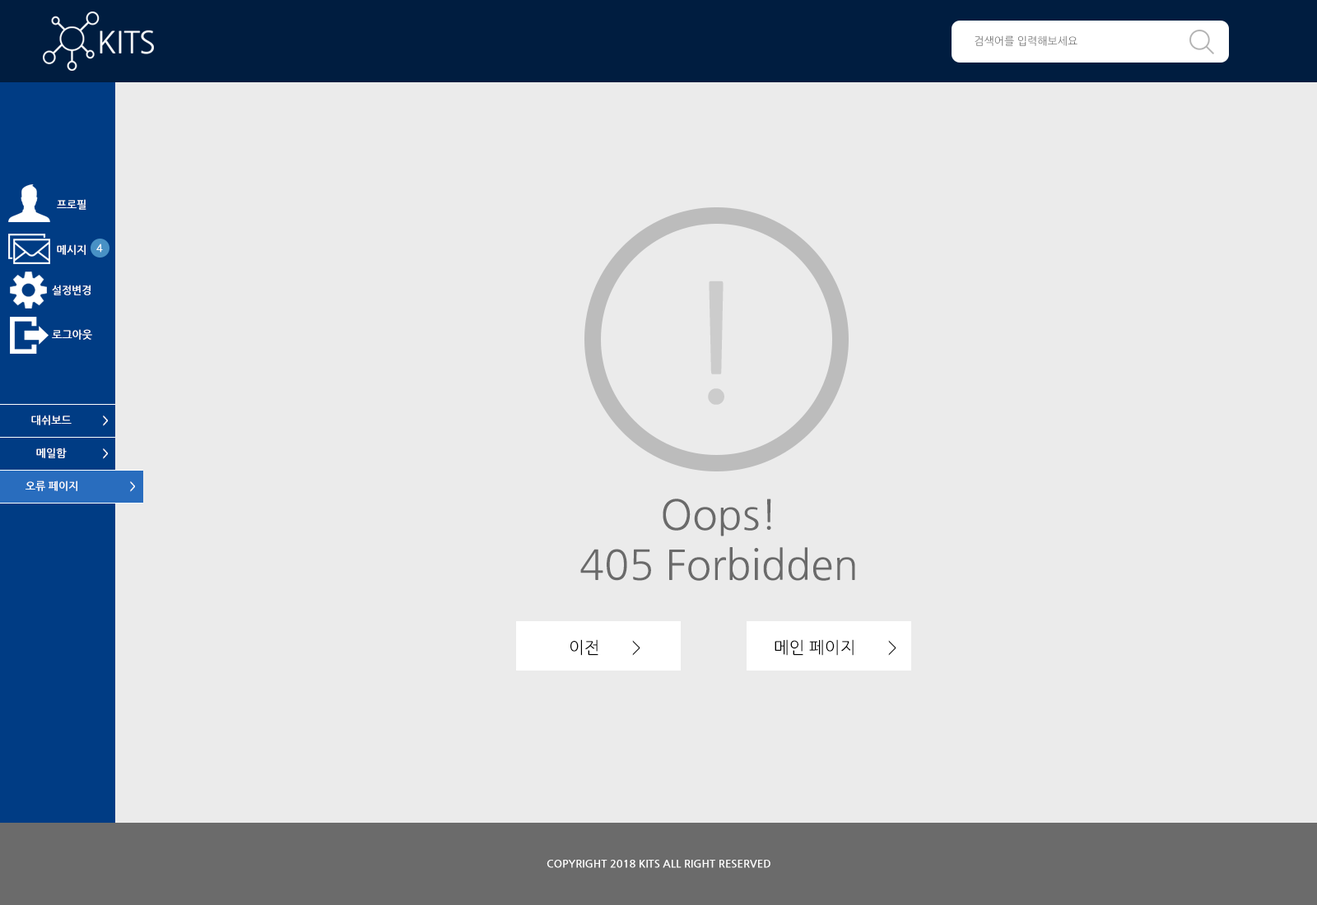
<style>
.page{position:relative;width:1317px;height:905px;background:#ebebeb}
.page>*{position:absolute;margin:0}
.t1{font:10.7px "NanumGothic";color:#737373;text-transform:uppercase}
.t2{font:10.7px "NanumGothicBold";color:#ffffff;text-transform:uppercase}
.t3{font:164.6px "NanumGothic";color:#cccccc;text-transform:uppercase}
.t4{font:41.2px "NanumGothic";color:#6a6a6a}
.t5{font:41.2px "NanumGothic";color:#6a6a6a;text-transform:uppercase}
.t6{font:16.5px "NanumGothic";color:#000000;text-transform:uppercase}
</style>
<div class="page">
<p class="t1" style="left:975px;top:35px;width:102px;height:11px">검색어를 입력해보세요</p>
<p class="t2" style="left:57px;top:199px;width:29px;height:11px">프로필</p>
<p class="t2" style="left:57px;top:244px;width:29px;height:11px">메시지</p>
<p class="t2" style="left:96px;top:244px;width:7px;height:9px">4</p>
<p class="t3" style="left:708px;top:281px;width:16px;height:124px">!</p>
<p class="t2" style="left:52px;top:285px;width:39px;height:10px">설정변경</p>
<p class="t2" style="left:52px;top:329px;width:40px;height:11px">로그아웃</p>
<p class="t2" style="left:31px;top:415px;width:41px;height:11px">대쉬보드</p>
<p class="t2" style="left:103px;top:416px;width:5px;height:10px">&gt;</p>
<p class="t2" style="left:36px;top:448px;width:31px;height:10px">메일함</p>
<p class="t2" style="left:103px;top:449px;width:5px;height:10px">&gt;</p>
<p class="t2" style="left:26px;top:481px;width:51px;height:10px">오류 페이지</p>
<p class="t2" style="left:130px;top:482px;width:5px;height:10px">&gt;</p>
<p class="t4" style="left:663px;top:499px;width:108px;height:38px">Oops<span class="t5">!</span></p>
<p class="t4" style="left:580px;top:547px;width:275px;height:34px"><span class="t5">405 F</span>orbidden</p>
<p class="t6" style="left:570px;top:640px;width:70px;height:16px">이전       &gt;</p>
<p class="t6" style="left:775px;top:640px;width:121px;height:16px">메인 페이지       &gt;</p>
<p class="t2" style="left:547px;top:860px;width:223px;height:8px">copyright 2018 kits all right reserved</p>
</div>
